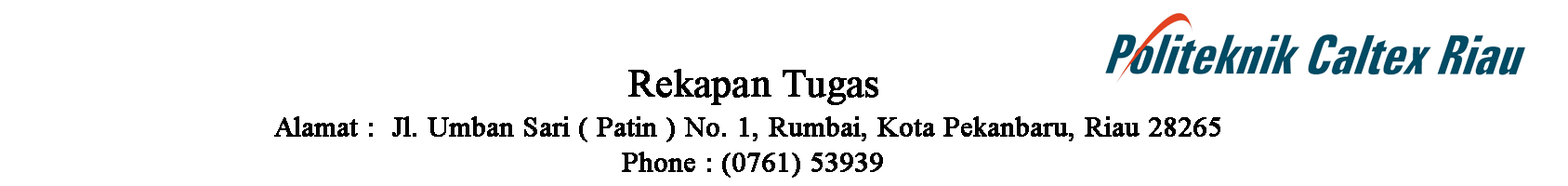
<style>
.page{position:relative;width:1568px;height:186px;background:#ffffff}
.page>*{position:absolute;margin:0}
.t1{font:38.7px "TimesNewRomanPSMT";color:#000000;font-weight:bold}
.t2{font:27.9px "TimesNewRomanPSMT";color:#000000;font-weight:bold}
</style>
<div class="page">
<p class="t1" style="left:628px;top:69px;width:250px;height:36px">Rekapan Tugas</p>
<p class="t2" style="left:274px;top:116px;width:946px;height:26px">Alamat :  Jl. Umban Sari ( Patin ) No. 1, Rumbai, Kota Pekanbaru, Riau 28265</p>
<p class="t2" style="left:622px;top:152px;width:261px;height:26px">Phone : (0761) 53939</p>
</div>
